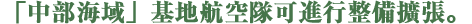
<style>
.page{position:relative;width:472px;height:24px;background:#ffffff}
.page>*{position:absolute;margin:0}
.t1{font:24px "RyuminPr6N-ExBold";color:#46754a;font-weight:bold}
</style>
<div class="page">
<p class="t1" style="left:16px;top:0px;width:440px;height:24px">「中部海域」基地航空隊可進行整備擴張。</p>
</div>
